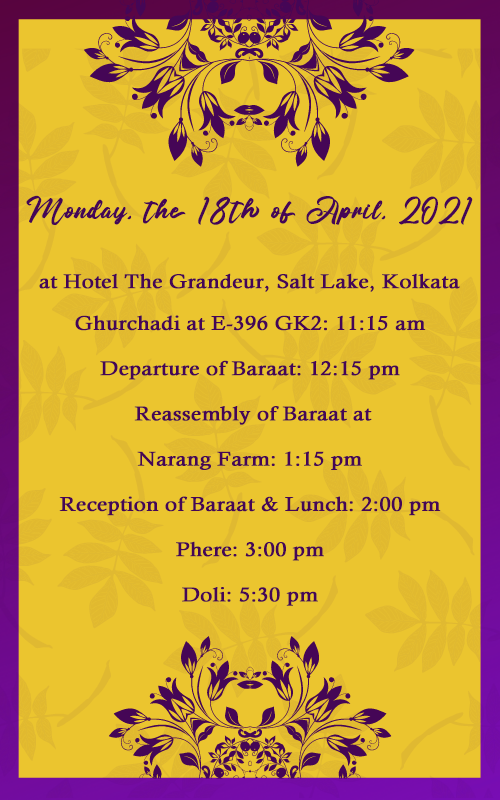
<style>
.page{position:relative;width:500px;height:800px;background:#ebc52f}
.page>*{position:absolute;margin:0}
.t1{font:40px "AngillaDenis";color:#450656;font-weight:bold;scale:1.09 1}
.t2{font:20px "CalistoMT";color:#450656;font-weight:bold;scale:1.09 1}
.t3{font:20px/45.2px "CalistoMT";color:#450656;font-weight:bold;scale:1.09 1}
</style>
<div class="page">
<p class="t1" style="left:26px;top:195px;width:447px;height:30px">Monday, the 18th of April, 2021</p>
<p class="t2" style="left:39px;top:273px;width:421px;height:19px">at Hotel The Grandeur, Salt Lake, Kolkata</p>
<p class="t3" style="left:59px;top:315px;width:382px;height:291px;text-align:center">Ghurchadi at E-396 GK2: 11:15 am<br>Departure of Baraat: 12:15 pm<br>Reassembly of Baraat at <br>Narang Farm: 1:15 pm<br>Reception of Baraat &amp; Lunch: 2:00 pm<br>Phere: 3:00 pm<br>Doli: 5:30 pm</p>
</div>
